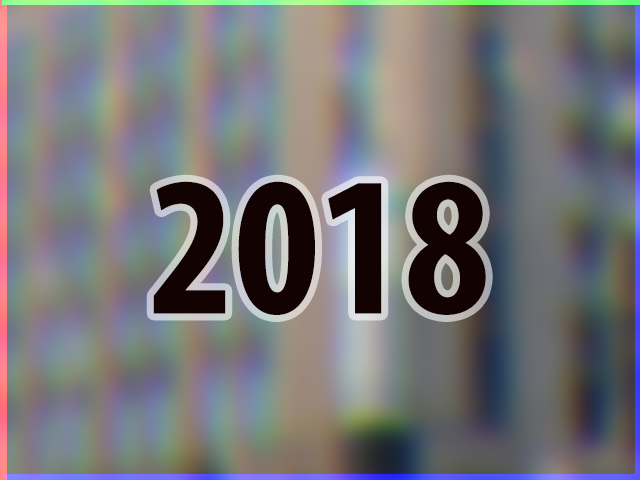
<style>
.page{position:relative;width:640px;height:480px}
.page>*{position:absolute;margin:0}
.t1{font:200px "MyriadPro-BoldCond";color:#120202}
</style>
<div class="page">
<p class="t1" style="left:153px;top:181px;width:333px;height:134px">2018</p>
</div>
